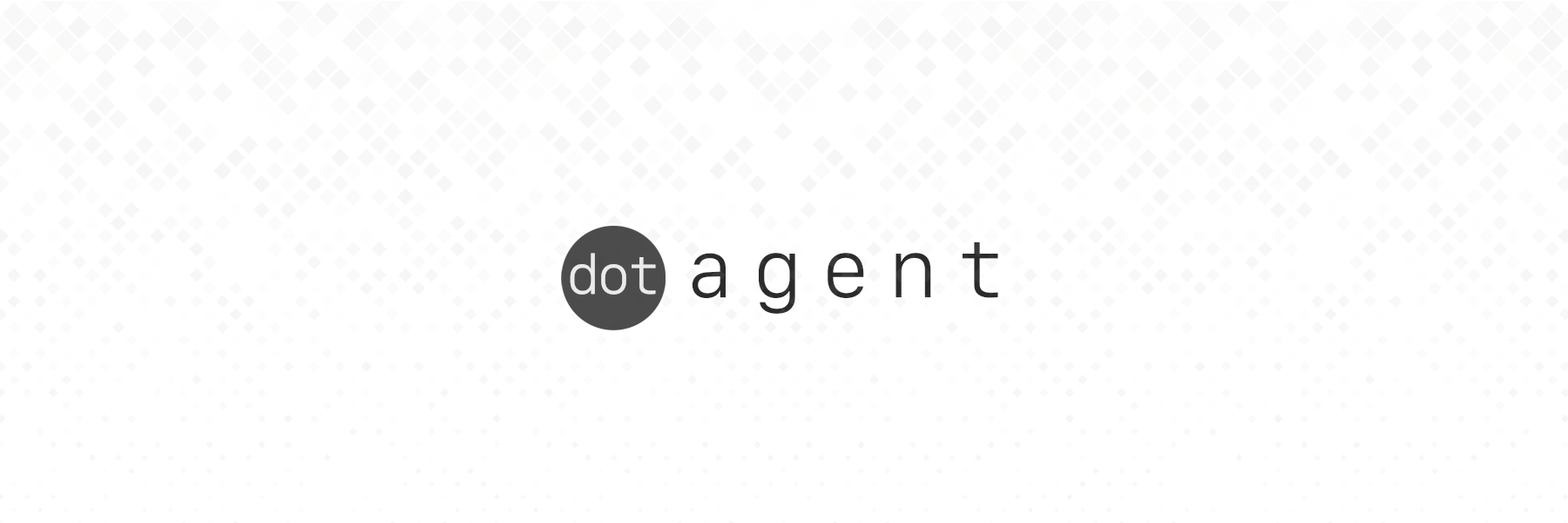
<style>
.page{position:relative;width:1568px;height:523px;background:#ffffff}
.page>*{position:absolute;margin:0}
.t1{font:82.6px "SFMono-Light";letter-spacing:0.2em;color:#2b2b2b}
.t2{font:54.9px "SFMono-Light";letter-spacing:-0.06em;color:#ffffff}
</style>
<div class="page">
<p class="t1" style="left:692px;top:242px;width:306px;height:72px">agent</p>
<p class="t2" style="left:570px;top:253px;width:86px;height:41px;opacity:0.83">dot</p>
</div>
